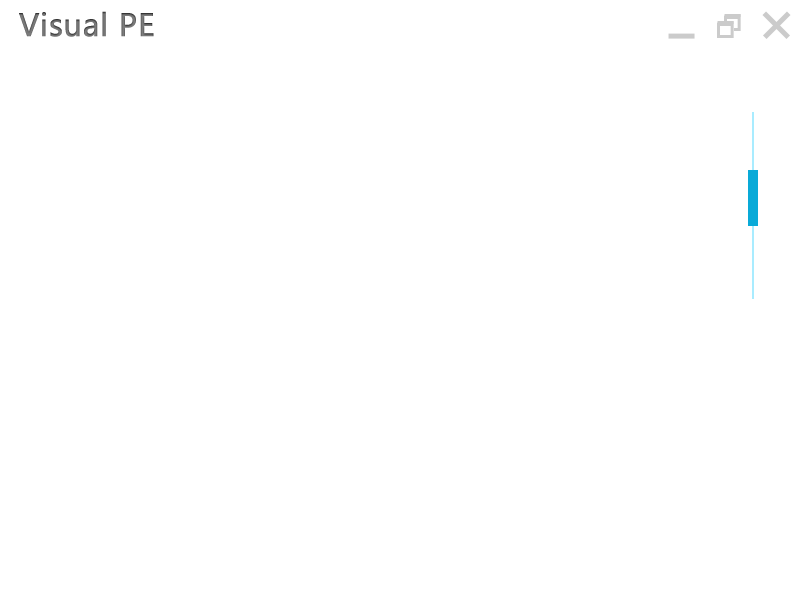
<style>
.page{position:relative;width:800px;height:600px;background:#ffffff}
.page>*{position:absolute;margin:0}
.t1{font:30px "MicrosoftYaHei";color:#7c7c7c;font-weight:bold}
</style>
<div class="page">
<p class="t1" style="left:19px;top:11px;width:135px;height:26px">Visual PE</p>
</div>
